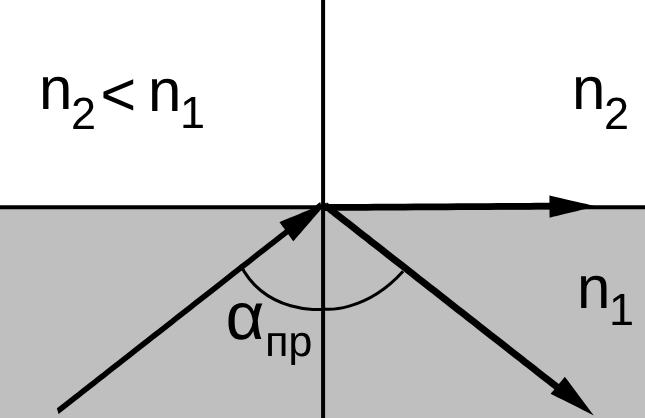
<style>
.page{position:relative;width:645px;height:418px;background:#ffffff}
.page>*{position:absolute;margin:0}
.t1{font:60px "Arimo-Regular";color:#000000}
.t2{font:61.2px "Arimo-Regular";color:#000000}
.t3{font:45px "Arimo-Regular";color:#000000}
.t4{font:67px "Arimo-Regular";color:#000000}
.t5{font:43px "Arimo-Regular";color:#000000}
</style>
<div class="page">
<p class="t1" style="left:42px;top:76px;width:27px;height:33px">n</p>
<p class="t1" style="left:151px;top:78px;width:27px;height:33px">n</p>
<p class="t1" style="left:575px;top:76px;width:27px;height:33px">n</p>
<p class="t2" style="left:103px;top:79px;width:31px;height:32px">&lt;</p>
<p class="t3" style="left:73px;top:97px;width:21px;height:32px">2</p>
<p class="t3" style="left:183px;top:97px;width:20px;height:31px">1</p>
<p class="t3" style="left:606px;top:97px;width:21px;height:32px">2</p>
<p class="t1" style="left:580px;top:275px;width:27px;height:33px">n</p>
<p class="t3" style="left:612px;top:294px;width:20px;height:31px">1</p>
<p class="t4" style="left:228px;top:302px;width:35px;height:38px">α</p>
<p class="t5" style="left:268px;top:332px;width:43px;height:33px">пр</p>
</div>
